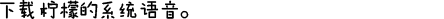
<style>
.page{position:relative;width:444px;height:19px;background:#ffffff}
.page>*{position:absolute;margin:0}
.t1{font:22px "¢è?";color:#000000}
</style>
<div class="page">
<p class="t1" style="left:0px;top:0px;width:189px;height:20px">下载柠檬的系统语音。</p>
</div>
